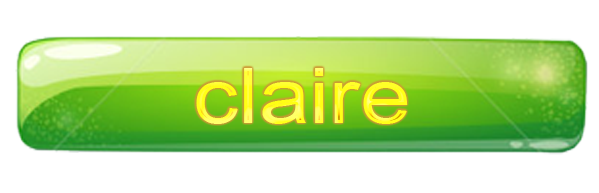
<style>
.page{position:relative;width:599px;height:193px;background:#ffffff}
.page>*{position:absolute;margin:0}
.t1{font:76.6px "ArialUnicodeMS";scale:1.19 1}
</style>
<div class="page">
<p class="t1" style="left:196px;top:68px;width:212px;height:56px">claire</p>
</div>
